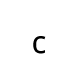
<style>
.page{position:relative;width:80px;height:80px;background:#ffffff}
.page>*{position:absolute;margin:0}
.t1{font:31.8px "DroidSans";color:#000000}
</style>
<div class="page">
<p class="t1" style="left:33px;top:36px;width:13px;height:18px">c</p>
</div>
